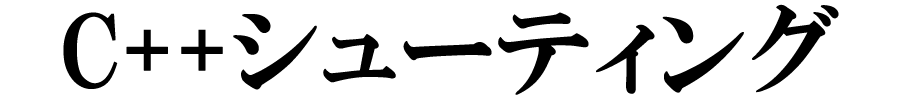
<style>
.page{position:relative;width:900px;height:100px;background:#ffffff}
.page>*{position:absolute;margin:0}
.t1{font:100.1px "HGPMinchoE";color:#000000;font-weight:bold}
</style>
<div class="page">
<p class="t1" style="left:63px;top:4px;width:776px;height:91px">C++シューティング</p>
</div>
